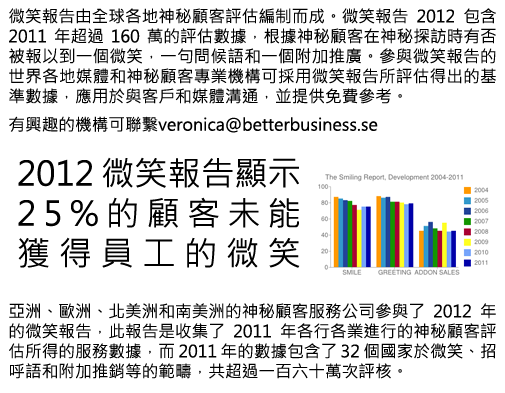
<style>
.page{position:relative;width:505px;height:393px;background:#ffffff}
.page>*{position:absolute;margin:0}
.t1{font:16.7px "MicrosoftJhengHeiRegular";color:#000000}
.t2{font:33.3px "MicrosoftJhengHeiRegular";color:#000000}
</style>
<div class="page">
<p class="t1" style="left:9px;top:8px;width:487px;height:125px;text-align:justify">微笑報告由全球各地神秘顧客評估編制而成。微笑報告 2012 包含 2011 年超過 160 萬的評估數據，根據神秘顧客在神秘探訪時有否被報以到一個微笑，一句問候語和一個附加推廣。參與微笑報告的世界各地媒體和神秘顧客專業機構可採用微笑報告所評估得出的基準數據，應用於與客戶和媒體溝通，並提供免費參考。<br>有興趣的機構可聯繫veronica@betterbusiness.se</p>
<p class="t2" style="left:18px;top:157px;width:282px;height:111px;text-align:justify">2012 微笑報告顯示<br>25%的顧客未能<br>獲得員工的微笑</p>
<p class="t1" style="left:9px;top:303px;width:487px;height:76px;text-align:justify">亞洲、歐洲、北美洲和南美洲的神秘顧客服務公司參與了 2012 年的微笑報告，此報告是收集了 2011 年各行各業進行的神秘顧客評估所得的服務數據，而 2011 年的數據包含了 32 個國家於微笑、招呼語和附加推銷等的範疇，共超過一百六十萬次評核。</p>
</div>
